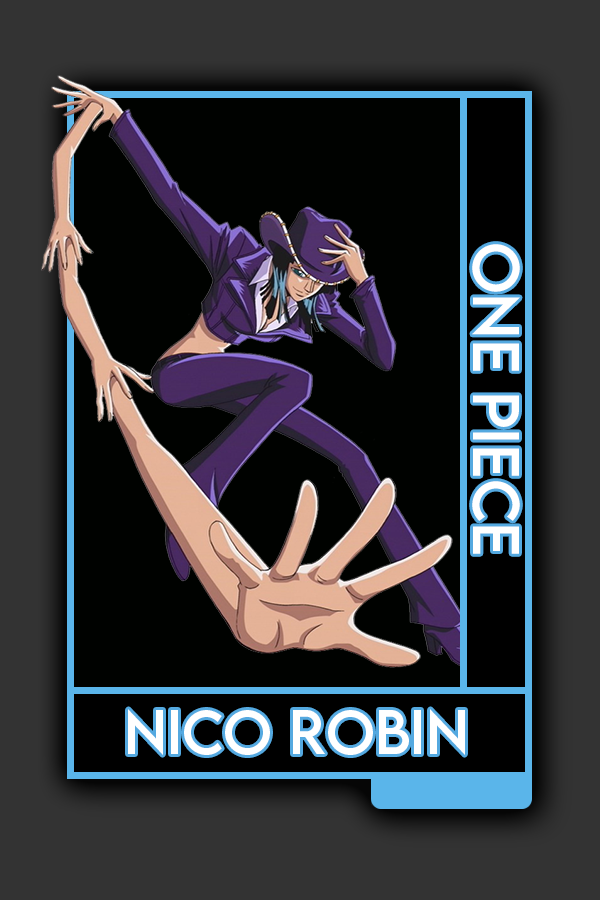
<style>
.page{position:relative;width:600px;height:900px;background:#000200}
.page>*{position:absolute;margin:0}
.t1{font:58.4px "LEMONMILK-Regular";color:#ffffff}
.t2{font:55.4px "LEMONMILK-Regular";color:#ffffff}
</style>
<div class="page">
<p class="t1" style="left:472px;top:244px;width:48px;height:310px;rotate:90deg">One Piece</p>
<p class="t2" style="left:128px;top:709px;width:337px;height:46px">Nico Robin</p>
</div>
